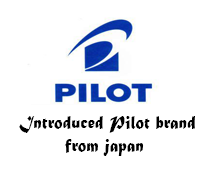
<style>
.page{position:relative;width:208px;height:175px;background:#ffffff}
.page>*{position:absolute;margin:0}
.t1{font:19px "MaturaMTScriptCapitals";color:#000000;scale:0.91 1}
</style>
<div class="page">
<p class="t1" style="left:19px;top:116px;width:176px;height:40px">Introduced Pilot brand<br>        from japan</p>
</div>
